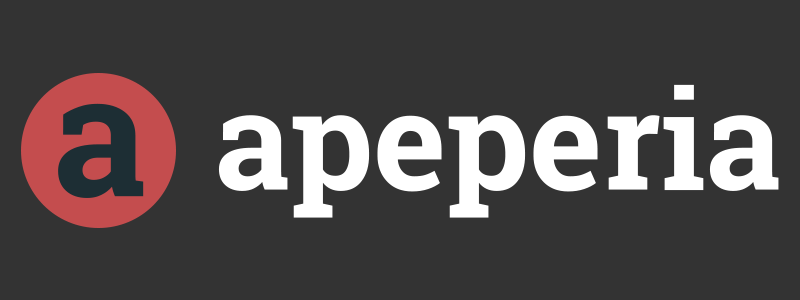
<style>
.page{position:relative;width:800px;height:300px;background:#333333}
.page>*{position:absolute;margin:0}
.t1{font:137.5px "RobotoSlab-Bold";color:#ffffff}
</style>
<div class="page">
<p class="t1" style="left:218px;top:84px;width:561px;height:134px">apeperia</p>
</div>
